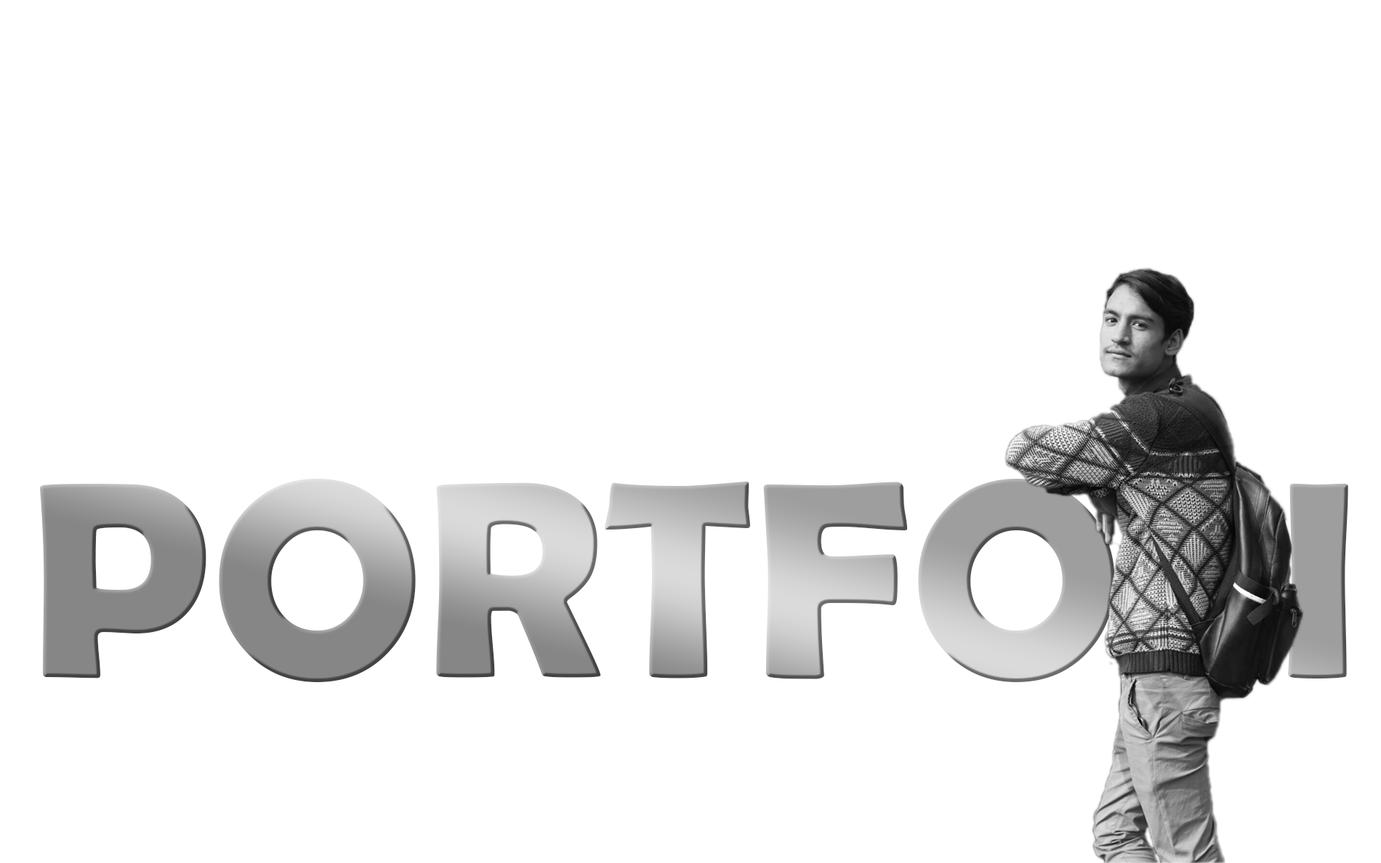
<style>
.page{position:relative;width:1381px;height:863px;background:#ffffff}
.page>*{position:absolute;margin:0}
.t1{font:281.9px "BerlinSansFBDemi-Bold"}
</style>
<div class="page">
<p class="t1" style="left:40px;top:479px;width:1308px;height:203px">PORTFOLIO</p>
</div>
